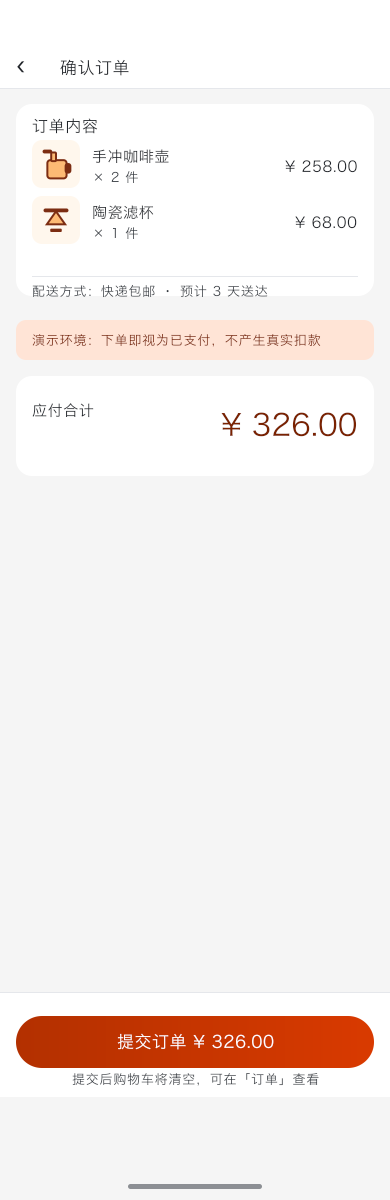
<style>
.page{position:relative;width:390px;height:1200px;background:#f5f5f5}
.page>*{position:absolute;margin:0}
.t1{font:24px "HiraginoSansGB-Regular";letter-spacing:0.022em;color:#1f2329}
.t2{font:17px "HiraginoSansGB-Regular";letter-spacing:0.03em;color:#282c31}
.t3{font:16px "HiraginoSansGB-Regular";letter-spacing:0.04em;color:#1f2329}
.t4{font:15px "HiraginoSansGB-Regular";letter-spacing:0.04em;color:#282b31}
.t5{font:15px "HiraginoSansGB-Regular";letter-spacing:0.04em;color:#1f2329}
.t6{font:13px "HiraginoSansGB-Regular";letter-spacing:0.06em;color:#43484e}
.t7{font:15px "HiraginoSansGB-Regular";letter-spacing:0.04em;color:#23272c}
.t8{font:13px "HiraginoSansGB-Regular";letter-spacing:0.06em;color:#43474d}
.t9{font:13px "HiraginoSansGB-Regular";letter-spacing:0.06em;color:#333940}
.t10{font:13px "HiraginoSansGB-Regular";letter-spacing:0.06em;color:#813114}
.t11{font:30px "HiraginoSansGB-Regular";color:#7a2200}
.t12{font:17px "HiraginoSansGB-Regular";letter-spacing:0.03em;color:#ffffff}
.t13{font:13px "HiraginoSansGB-Regular";letter-spacing:0.06em;color:#3d4248}
</style>
<div class="page">
<p class="t1" style="left:16px;top:61px;width:10px;height:13px">‹</p>
<p class="t2" style="left:59px;top:59px;width:71px;height:18px">确认订单</p>
<p class="t3" style="left:31px;top:118px;width:68px;height:17px">订单内容</p>
<p class="t4" style="left:91px;top:149px;width:79px;height:15px">手冲咖啡壶</p>
<p class="t5" style="left:284px;top:160px;width:74px;height:14px">¥ 258.00</p>
<p class="t6" style="left:93px;top:171px;width:46px;height:13px">× 2 件</p>
<p class="t7" style="left:92px;top:205px;width:63px;height:16px">陶瓷滤杯</p>
<p class="t5" style="left:294px;top:216px;width:64px;height:14px">¥ 68.00</p>
<p class="t8" style="left:93px;top:227px;width:46px;height:13px">× 1 件</p>
<p class="t9" style="left:31px;top:284px;width:238px;height:15px">配送方式：快递包邮 · 预计 3 天送达</p>
<p class="t10" style="left:31px;top:333px;width:291px;height:14px">演示环境：下单即视为已支付，不产生真实扣款</p>
<p class="t5" style="left:31px;top:403px;width:64px;height:15px">应付合计</p>
<p class="t11" style="left:220px;top:412px;width:138px;height:26px">¥ 326.00</p>
<p class="t12" style="left:116px;top:1033px;width:159px;height:18px">提交订单 ¥ 326.00</p>
<p class="t13" style="left:71px;top:1072px;width:249px;height:15px">提交后购物车将清空，可在「订单」查看</p>
</div>
